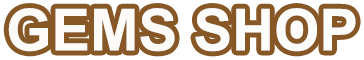
<style>
.page{position:relative;width:364px;height:60px;background:#875826}
.page>*{position:absolute;margin:0}
.t1{font:58px "Arial-BoldMT";color:#ffffff}
</style>
<div class="page">
<p class="t1" style="left:8px;top:8px;width:348px;height:44px">GEMS SHOP</p>
</div>
